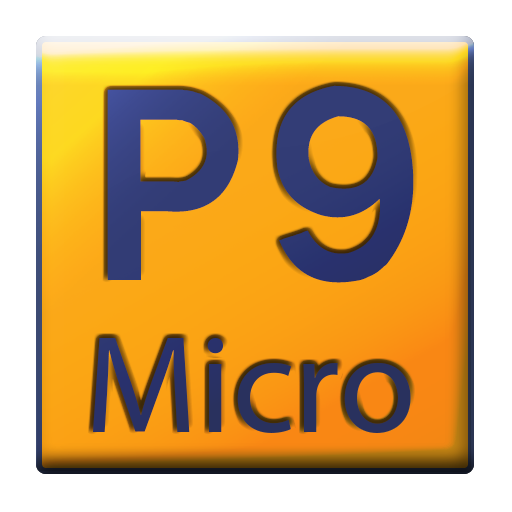
<style>
.page{position:relative;width:512px;height:512px;background:#ffffff}
.page>*{position:absolute;margin:0}
.t1{font:254px "Transport-Regular";color:#333d76}
.t2{font:140px "MyriadPro-Regular";color:#333d76}
</style>
<div class="page">
<p class="t1" style="left:107px;top:85px;width:307px;height:198px">P9</p>
<p class="t2" style="left:93px;top:338px;width:318px;height:95px">Micro</p>
</div>
